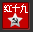
<style>
.page{position:relative;width:33px;height:32px;background:#c50000}
.page>*{position:absolute;margin:0}
.t1{font:10.4px "SimSun";letter-spacing:-0.25em;color:#ffffff}
</style>
<div class="page">
<p class="t1" style="left:4px;top:4px;width:24px;height:9px">红十九</p>
</div>
